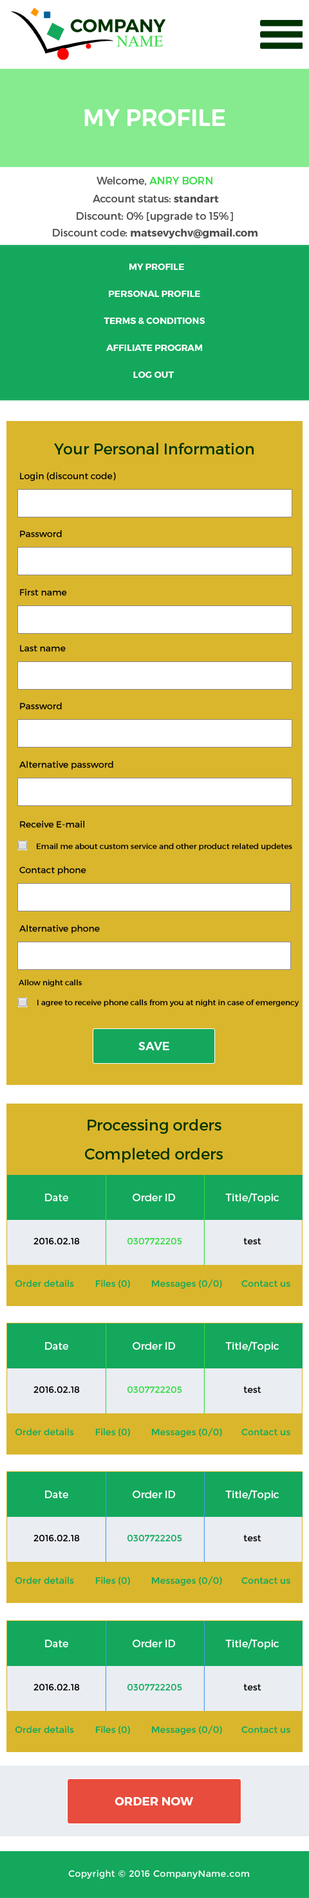
<style>
.page{position:relative;width:309px;height:1898px;background:#dab62c}
.page>*{position:absolute;margin:0}
.t1{font:23.1px "Montserrat-SemiBold";color:#ffffff;text-transform:uppercase}
.t2{font:10.3px "Montserrat-Regular";color:#35dc44;text-transform:uppercase}
.t3{font:10.3px "Montserrat-Regular";color:#4e4e4e}
.t4{font:10.3px "Montserrat-Bold";color:#4e4e4e}
.t5{font:9px/27px "Montserrat-Bold";color:#ffffff;text-transform:uppercase}
.t6{font:15.4px "Montserrat-Regular";color:#003300}
.t7{font:9px "Montserrat-Regular";color:#000000}
.t8{font:7.7px "Montserrat-Regular";color:#000000}
.t9{font:11.6px "Montserrat-SemiBold";color:#ffffff;text-transform:uppercase}
.t10{font:10.3px "Montserrat-Regular";color:#ffffff}
.t11{font:9px "Montserrat-Regular";color:#35dc44}
.t12{font:9px "Montserrat-Regular";color:#14a85c}
.t13{font:11.9px "Montserrat-Bold";color:#ffffff;text-transform:uppercase}
.t14{font:9px "Montserrat-Regular";letter-spacing:0.025em;color:#ffffff}
</style>
<div class="page">
<p class="t1" style="left:84px;top:109px;width:141px;height:17px">MY profile</p>
<p class="t2" style="left:96px;top:177px;width:116px;height:9px"><span class="t3">Welcome, </span>Anry Born</p>
<p class="t3" style="left:93px;top:195px;width:126px;height:8px">Account status: <span class="t4">standart</span></p>
<p class="t3" style="left:76px;top:212px;width:157px;height:10px">Discount: 0% [upgrade to 15%]</p>
<p class="t4" style="left:53px;top:228px;width:204px;height:11px"><span class="t3">Discount code: </span>matsevychv@gmail.com</p>
<p class="t5" style="left:104px;top:264px;width:100px;height:114px;text-align:center">My profile   <br>PErsonal profile    <br>Terms &amp; conditions    <br>Affiliate Program    <br>Log Out</p>
<p class="t6" style="left:54px;top:443px;width:199px;height:12px">Your Personal Information</p>
<p class="t7" style="left:20px;top:473px;width:96px;height:9px">Login (discount code)</p>
<p class="t7" style="left:20px;top:530px;width:42px;height:7px">Password</p>
<p class="t7" style="left:20px;top:589px;width:47px;height:7px">First name</p>
<p class="t7" style="left:20px;top:645px;width:46px;height:7px">Last name</p>
<p class="t7" style="left:20px;top:703px;width:42px;height:7px">Password</p>
<p class="t7" style="left:19px;top:761px;width:94px;height:9px">Alternative password</p>
<p class="t7" style="left:20px;top:821px;width:64px;height:7px">Receive E-mail</p>
<p class="t8" style="left:37px;top:843px;width:255px;height:8px">Email me about custom service and other product related updetes</p>
<p class="t7" style="left:19px;top:867px;width:67px;height:9px">Contact phone</p>
<p class="t7" style="left:19px;top:925px;width:81px;height:9px">Alternative phone</p>
<p class="t8" style="left:19px;top:980px;width:63px;height:7px">Allow night calls</p>
<p class="t8" style="left:37px;top:1000px;width:262px;height:7px">I agree to receive phone calls from you at night in case of emergency</p>
<p class="t9" style="left:138px;top:1042px;width:31px;height:8px">Save</p>
<p class="t6" style="left:87px;top:1119px;width:134px;height:15px">Processing orders</p>
<p class="t6" style="left:85px;top:1148px;width:137px;height:15px">Completed orders</p>
<p class="t10" style="left:45px;top:1194px;width:23px;height:8px">Date</p>
<p class="t10" style="left:132px;top:1194px;width:44px;height:8px">Order ID</p>
<p class="t10" style="left:225px;top:1192px;width:53px;height:11px">Title/Topic</p>
<p class="t7" style="left:33px;top:1238px;width:47px;height:7px">2016.02.18</p>
<p class="t11" style="left:127px;top:1238px;width:55px;height:7px">0307722205</p>
<p class="t7" style="left:243px;top:1238px;width:18px;height:7px">test</p>
<p class="t12" style="left:15px;top:1280px;width:59px;height:8px">Order details</p>
<p class="t12" style="left:95px;top:1280px;width:35px;height:8px">Files (0)</p>
<p class="t12" style="left:151px;top:1279px;width:71px;height:11px">Messages (0/0)</p>
<p class="t12" style="left:241px;top:1280px;width:49px;height:8px">Contact us</p>
<p class="t10" style="left:45px;top:1342px;width:23px;height:8px">Date</p>
<p class="t10" style="left:132px;top:1342px;width:44px;height:8px">Order ID</p>
<p class="t10" style="left:225px;top:1341px;width:53px;height:11px">Title/Topic</p>
<p class="t7" style="left:33px;top:1386px;width:47px;height:8px">2016.02.18</p>
<p class="t11" style="left:127px;top:1386px;width:55px;height:8px">0307722205</p>
<p class="t7" style="left:243px;top:1387px;width:18px;height:7px">test</p>
<p class="t12" style="left:15px;top:1428px;width:59px;height:8px">Order details</p>
<p class="t12" style="left:95px;top:1428px;width:35px;height:9px">Files (0)</p>
<p class="t12" style="left:151px;top:1428px;width:71px;height:10px">Messages (0/0)</p>
<p class="t12" style="left:241px;top:1428px;width:49px;height:8px">Contact us</p>
<p class="t10" style="left:45px;top:1491px;width:23px;height:7px">Date</p>
<p class="t10" style="left:132px;top:1491px;width:44px;height:7px">Order ID</p>
<p class="t10" style="left:225px;top:1490px;width:53px;height:10px">Title/Topic</p>
<p class="t7" style="left:33px;top:1534px;width:47px;height:8px">2016.02.18</p>
<p class="t12" style="left:127px;top:1534px;width:55px;height:8px">0307722205</p>
<p class="t7" style="left:243px;top:1535px;width:18px;height:7px">test</p>
<p class="t12" style="left:15px;top:1577px;width:59px;height:8px">Order details</p>
<p class="t12" style="left:95px;top:1577px;width:35px;height:8px">Files (0)</p>
<p class="t12" style="left:151px;top:1576px;width:71px;height:11px">Messages (0/0)</p>
<p class="t12" style="left:241px;top:1577px;width:49px;height:8px">Contact us</p>
<p class="t10" style="left:45px;top:1640px;width:23px;height:8px">Date</p>
<p class="t10" style="left:132px;top:1640px;width:44px;height:8px">Order ID</p>
<p class="t10" style="left:225px;top:1639px;width:53px;height:11px">Title/Topic</p>
<p class="t7" style="left:33px;top:1684px;width:47px;height:7px">2016.02.18</p>
<p class="t12" style="left:127px;top:1684px;width:55px;height:7px">0307722205</p>
<p class="t7" style="left:243px;top:1684px;width:18px;height:7px">test</p>
<p class="t12" style="left:15px;top:1726px;width:59px;height:8px">Order details</p>
<p class="t12" style="left:95px;top:1726px;width:35px;height:8px">Files (0)</p>
<p class="t12" style="left:151px;top:1725px;width:71px;height:11px">Messages (0/0)</p>
<p class="t12" style="left:241px;top:1726px;width:49px;height:8px">Contact us</p>
<p class="t13" style="left:114px;top:1797px;width:80px;height:9px">Order NOW</p>
<p class="t14" style="left:68px;top:1870px;width:181px;height:10px">Copyright © 2016 CompanyName.com</p>
</div>
